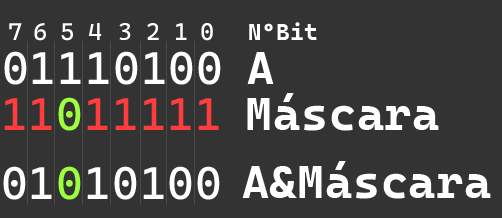
<style>
.page{position:relative;width:502px;height:218px;background:#333333}
.page>*{position:absolute;margin:0}
.t1{font:24.2px "CascadiaCode-Roman";letter-spacing:0.02em;color:#ffffff}
.t2{font:23.3px "CascadiaCodeRoman-Bold";letter-spacing:0.02em;color:#ffffff}
.t3{font:45.8px "CascadiaCode-Roman";letter-spacing:0.02em;color:#ffffff}
.t4{font:45.8px "CascadiaCodeRoman-Bold";letter-spacing:0.02em;color:#ffffff}
.t5{font:45.8px "CascadiaCode-Roman";letter-spacing:0.02em;color:#ff3d3d}
.t6{font:45.8px "CascadiaCode-Roman";letter-spacing:0.02em;color:#9dff3d}
</style>
<div class="page">
<p class="t1" style="left:9px;top:23px;width:13px;height:17px">7</p>
<p class="t1" style="left:34px;top:23px;width:12px;height:18px">6</p>
<p class="t1" style="left:61px;top:23px;width:12px;height:18px">5</p>
<p class="t1" style="left:88px;top:23px;width:14px;height:17px">4</p>
<p class="t1" style="left:119px;top:23px;width:12px;height:17px">3</p>
<p class="t1" style="left:147px;top:23px;width:12px;height:17px">2</p>
<p class="t1" style="left:176px;top:23px;width:11px;height:17px">1</p>
<p class="t1" style="left:201px;top:23px;width:12px;height:18px">0</p>
<p class="t2" style="left:249px;top:22px;width:68px;height:18px">NºBit</p>
<p class="t3" style="left:4px;top:51px;width:217px;height:34px">01110100</p>
<p class="t4" style="left:247px;top:52px;width:27px;height:32px">A</p>
<p class="t5" style="left:4px;top:97px;width:215px;height:34px">11<span class="t6">0</span>11111</p>
<p class="t4" style="left:247px;top:93px;width:192px;height:38px">Máscara</p>
<p class="t4" style="left:242px;top:161px;width:249px;height:38px">A&amp;Máscara</p>
<p class="t3" style="left:3px;top:166px;width:217px;height:34px">01<span class="t6">0</span>10100</p>
</div>
